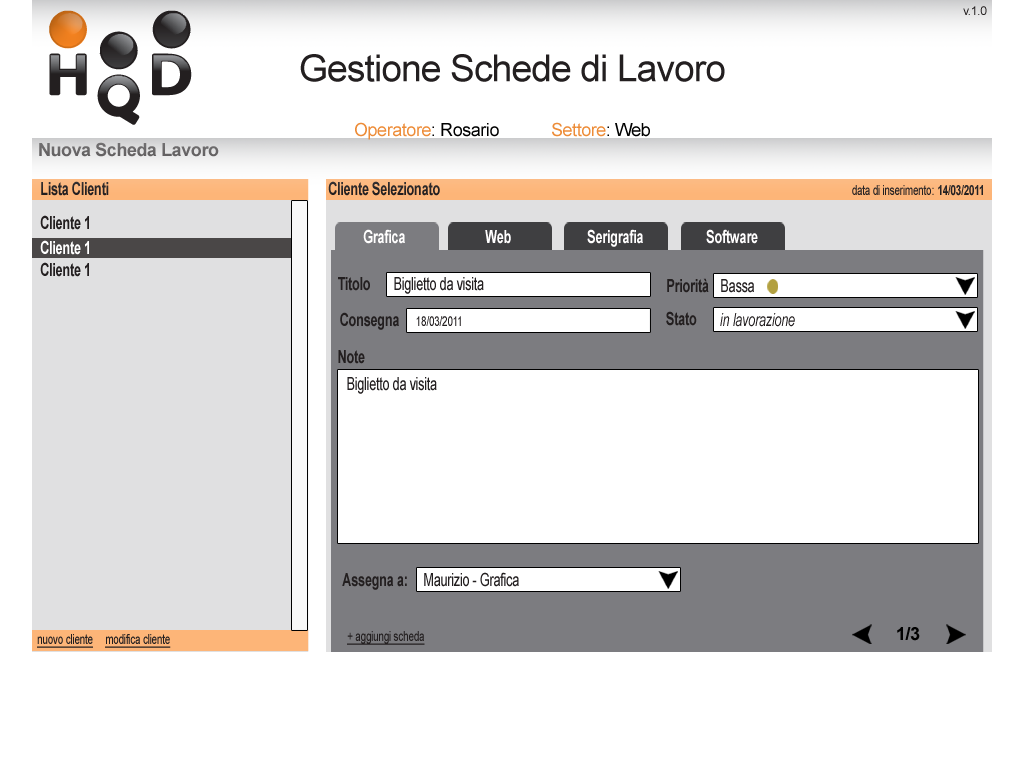
<style>
.page{position:relative;width:1024px;height:768px;background:#ffffff}
.page>*{position:absolute;margin:0}
.t1{font:12px "ArialMT";letter-spacing:-0.025em;color:#231f20}
.t2{font:37.2px "ArialMT";letter-spacing:-0.025em;color:#231f20}
.t3{font:18px "ArialMT";letter-spacing:-0.025em;color:#ed8c38}
.t4{font:18px "ArialMT";letter-spacing:-0.025em;color:#000000}
.t5{font:18px "Arial-BoldMT";letter-spacing:-0.025em;color:#696667}
.t6{font:18px "Arial-BoldMT";letter-spacing:-0.025em;color:#231f20;scale:0.71 1}
.t7{font:14px "ArialMT";letter-spacing:-0.025em;color:#231f20;scale:0.71 1}
.t8{font:14px "Arial-BoldMT";letter-spacing:-0.025em;color:#231f20;scale:0.71 1}
.t9{font:18px "Arial-BoldMT";letter-spacing:-0.025em;color:#fffefe;scale:0.71 1}
.t10{font:18px "Arial-BoldMT";letter-spacing:-0.025em;color:#ffffff;scale:0.71 1}
.t11{font:18px "ArialMT";letter-spacing:-0.025em;color:#231f20;scale:0.71 1}
.t12{font:18px "Arial-ItalicMT";letter-spacing:-0.025em;color:#231f20;scale:0.71 1}
.t13{font:18px "Arial-BoldMT";letter-spacing:-0.025em;color:#010101}
.t14{font:14px "ArialMT";letter-spacing:-0.025em;color:#231f20;text-decoration:underline;scale:0.71 1}
</style>
<div class="page">
<p class="t1" style="left:963px;top:6px;width:24px;height:9px">v.1.0</p>
<p class="t2" style="left:300px;top:54px;width:425px;height:28px">Gestione Schede di Lavoro</p>
<p class="t3" style="left:355px;top:122px;width:144px;height:18px">Operatore<span class="t4">: Rosario</span></p>
<p class="t3" style="left:552px;top:122px;width:98px;height:15px">Settore<span class="t4">: Web</span></p>
<p class="t5" style="left:39px;top:142px;width:180px;height:15px">Nuova Scheda Lavoro</p>
<p class="t6" style="left:41px;top:181px;width:68px;height:15px">Lista Clienti</p>
<p class="t6" style="left:328px;top:181px;width:112px;height:15px">Cliente Selezionato</p>
<p class="t7" style="left:852px;top:185px;width:82px;height:10px">data di inserimento:</p>
<p class="t8" style="left:938px;top:185px;width:45px;height:11px">14/03/2011</p>
<p class="t6" style="left:40px;top:215px;width:49px;height:15px">Cliente 1</p>
<p class="t9" style="left:363px;top:229px;width:42px;height:15px">Grafica</p>
<p class="t9" style="left:485px;top:230px;width:26px;height:14px">Web</p>
<p class="t9" style="left:587px;top:229px;width:56px;height:18px">Serigrafia</p>
<p class="t9" style="left:706px;top:229px;width:52px;height:15px">Software</p>
<p class="t10" style="left:40px;top:240px;width:49px;height:15px">Cliente 1</p>
<p class="t6" style="left:40px;top:262px;width:49px;height:15px">Cliente 1</p>
<p class="t6" style="left:338px;top:277px;width:32px;height:14px">Titolo</p>
<p class="t11" style="left:394px;top:277px;width:90px;height:17px">Biglietto da visita</p>
<p class="t6" style="left:667px;top:278px;width:42px;height:15px">Priorità</p>
<p class="t11" style="left:721px;top:279px;width:33px;height:14px">Bassa</p>
<p class="t6" style="left:340px;top:312px;width:59px;height:18px">Consegna</p>
<p class="t7" style="left:416px;top:316px;width:45px;height:10px">18/03/2011</p>
<p class="t6" style="left:666px;top:311px;width:31px;height:15px">Stato</p>
<p class="t12" style="left:720px;top:313px;width:75px;height:14px">in lavorazione</p>
<p class="t6" style="left:338px;top:350px;width:27px;height:14px">Note</p>
<p class="t11" style="left:347px;top:377px;width:90px;height:17px">Biglietto da visita</p>
<p class="t6" style="left:342px;top:573px;width:65px;height:17px">Assegna a:</p>
<p class="t11" style="left:424px;top:572px;width:95px;height:15px">Maurizio - Grafica</p>
<p class="t13" style="left:897px;top:627px;width:23px;height:14px">1/3</p>
<p class="t14" style="left:37px;top:634px;width:56px;height:14px">nuovo cliente</p>
<p class="t14" style="left:105px;top:634px;width:66px;height:14px">modifica cliente</p>
<p class="t14" style="left:347px;top:631px;width:78px;height:14px">+ aggiungi scheda</p>
</div>
